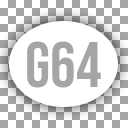
<style>
.page{position:relative;width:128px;height:128px;background:#ffffff}
.page>*{position:absolute;margin:0}
.t1{font:64px "BebasNeue-Regular";color:#a5a5a5}
</style>
<div class="page">
<p class="t1" style="left:27px;top:41px;width:74px;height:47px">G64</p>
</div>
